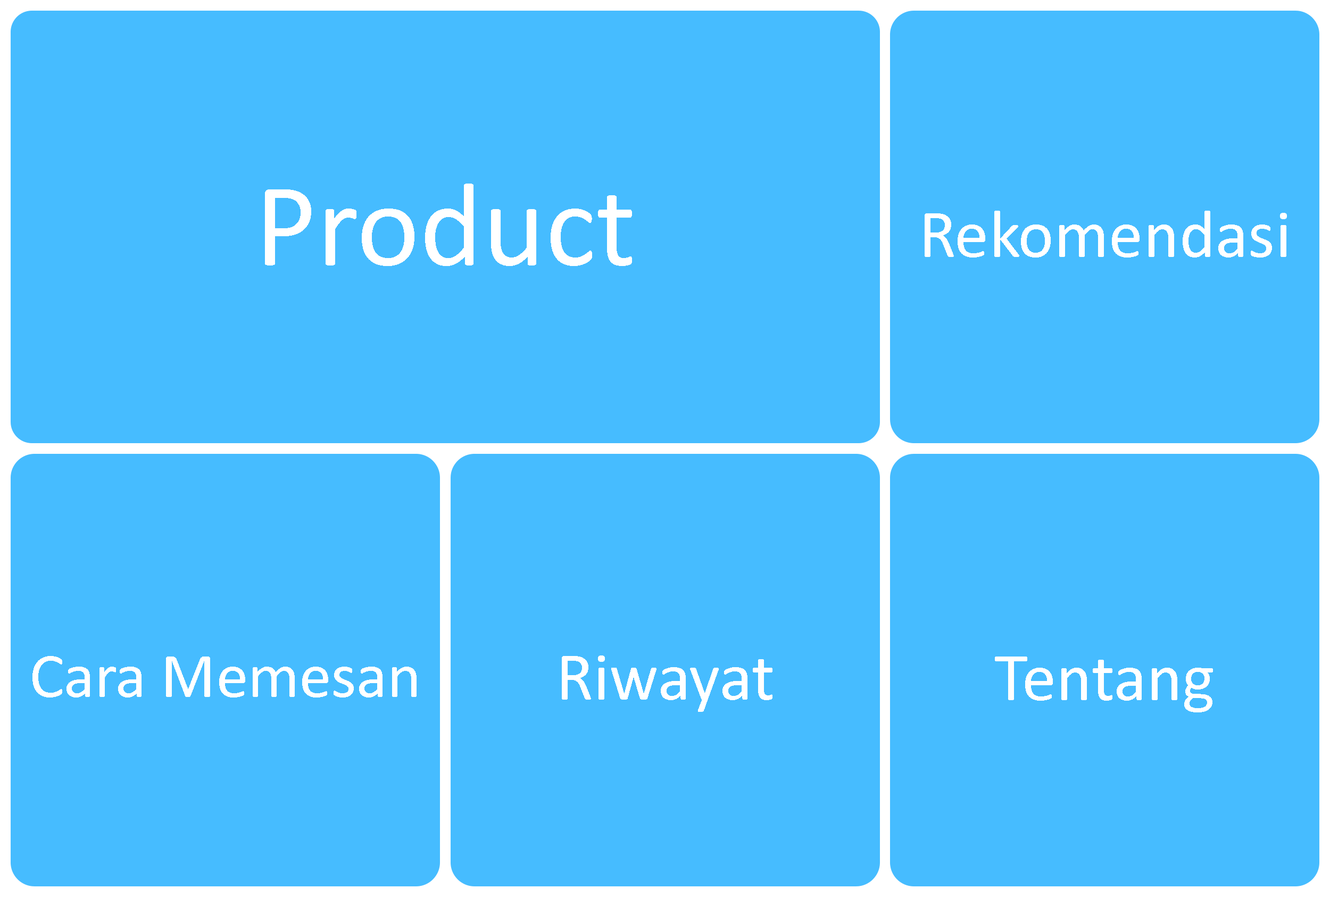
<style>
.page{position:relative;width:1330px;height:897px;background:#46bcff}
.page>*{position:absolute;margin:0}
.t1{font:119.7px "Calibri";color:#ffffff}
.t2{font:68.7px "Calibri";color:#ffffff}
.t3{font:64.3px "Calibri";color:#ffffff}
</style>
<div class="page">
<p class="t1" style="left:265px;top:184px;width:367px;height:82px">Product</p>
<p class="t2" style="left:924px;top:211px;width:363px;height:46px">Rekomendasi</p>
<p class="t3" style="left:32px;top:656px;width:384px;height:41px">Cara Memesan</p>
<p class="t2" style="left:562px;top:655px;width:210px;height:57px">Riwayat</p>
<p class="t2" style="left:995px;top:656px;width:218px;height:56px">Tentang</p>
</div>
